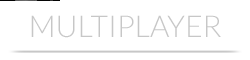
<style>
.page{position:relative;width:250px;height:60px;background:#ffffff}
.page>*{position:absolute;margin:0}
.t1{font:29.9px "Lato-Light";color:#c7c7c7}
</style>
<div class="page">
<p class="t1" style="left:31px;top:15px;width:190px;height:23px">MULTIPLAYER</p>
</div>
